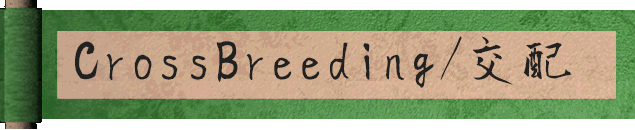
<style>
.page{position:relative;width:635px;height:130px}
.page>*{position:absolute;margin:0}
.t1{font:56px "KouzanBrushFontOTF";color:#212121}
.t2{font:56px "KouzanBrushFontGyousyoOTF";color:#212121}
</style>
<div class="page">
<p class="t1" style="left:75px;top:36px;width:387px;height:52px">CrossBreeding/</p>
<p class="t2" style="left:472px;top:36px;width:100px;height:49px">交配</p>
</div>
